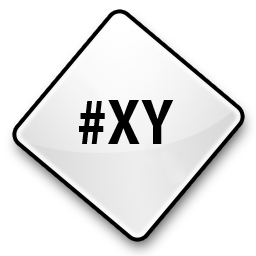
<style>
.page{position:relative;width:256px;height:256px;background:#ffffff}
.page>*{position:absolute;margin:0}
.t1{font:66px "MyriadPro-Bold";letter-spacing:0.005em;color:#010101;scale:0.82 1}
</style>
<div class="page">
<p class="t1" style="left:79px;top:100px;width:95px;height:44px">#XY</p>
</div>
